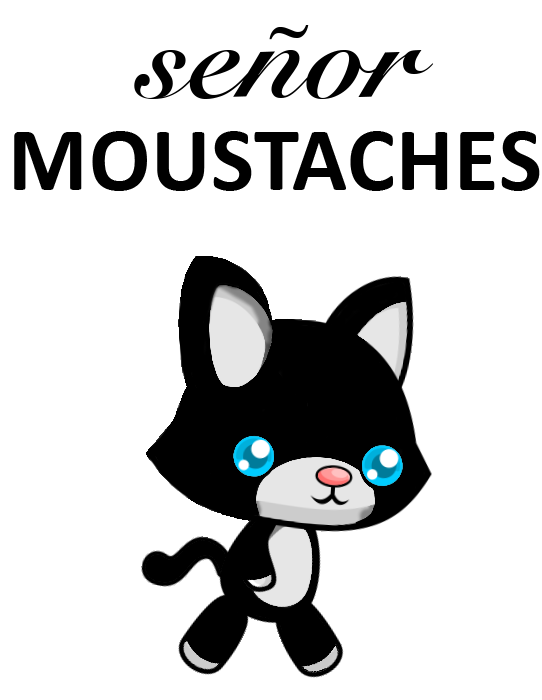
<style>
.page{position:relative;width:542px;height:700px;background:#ffffff}
.page>*{position:absolute;margin:0}
.t1{font:128px "SnellRoundhand-Bold";letter-spacing:0.01em;color:#000000}
.t2{font:90.7px "Calibri-Bold";letter-spacing:0.01em;color:#000000}
</style>
<div class="page">
<p class="t1" style="left:134px;top:25px;width:300px;height:74px">señor</p>
<p class="t2" style="left:14px;top:131px;width:526px;height:60px">MOUSTACHES</p>
</div>
